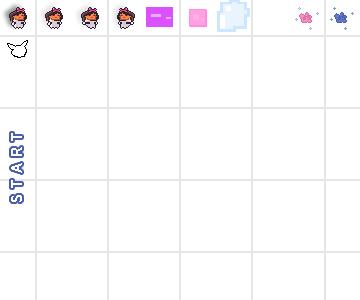
<style>
.page{position:relative;width:360px;height:300px;background:#ffffff}
.page>*{position:absolute;margin:0}
.t1{font:16px "Cabin-SemiBold";letter-spacing:0.4em;color:#ffffff}
</style>
<div class="page">
<p class="t1" style="left:11px;top:133px;width:11px;height:69px;rotate:-90deg">START</p>
</div>
